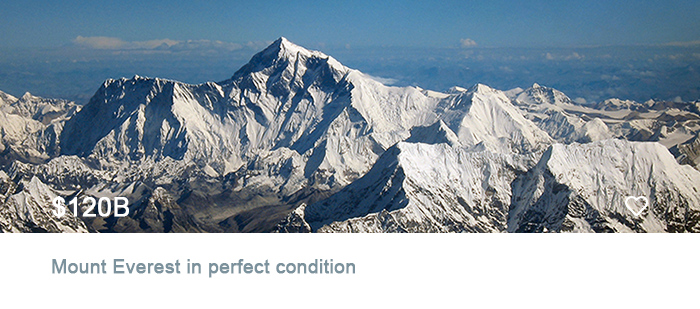
<style>
.page{position:relative;width:700px;height:309px;background:#ffffff}
.page>*{position:absolute;margin:0}
.t1{font:26.1px "ArialMT";color:#ffffff;font-weight:bold}
.t2{font:19px "ArialMT";color:#7b919c;font-weight:bold}
</style>
<div class="page">
<p class="t1" style="left:52px;top:196px;width:77px;height:23px">$120B</p>
<p class="t2" style="left:52px;top:259px;width:303px;height:19px">Mount Everest in perfect condition</p>
</div>
